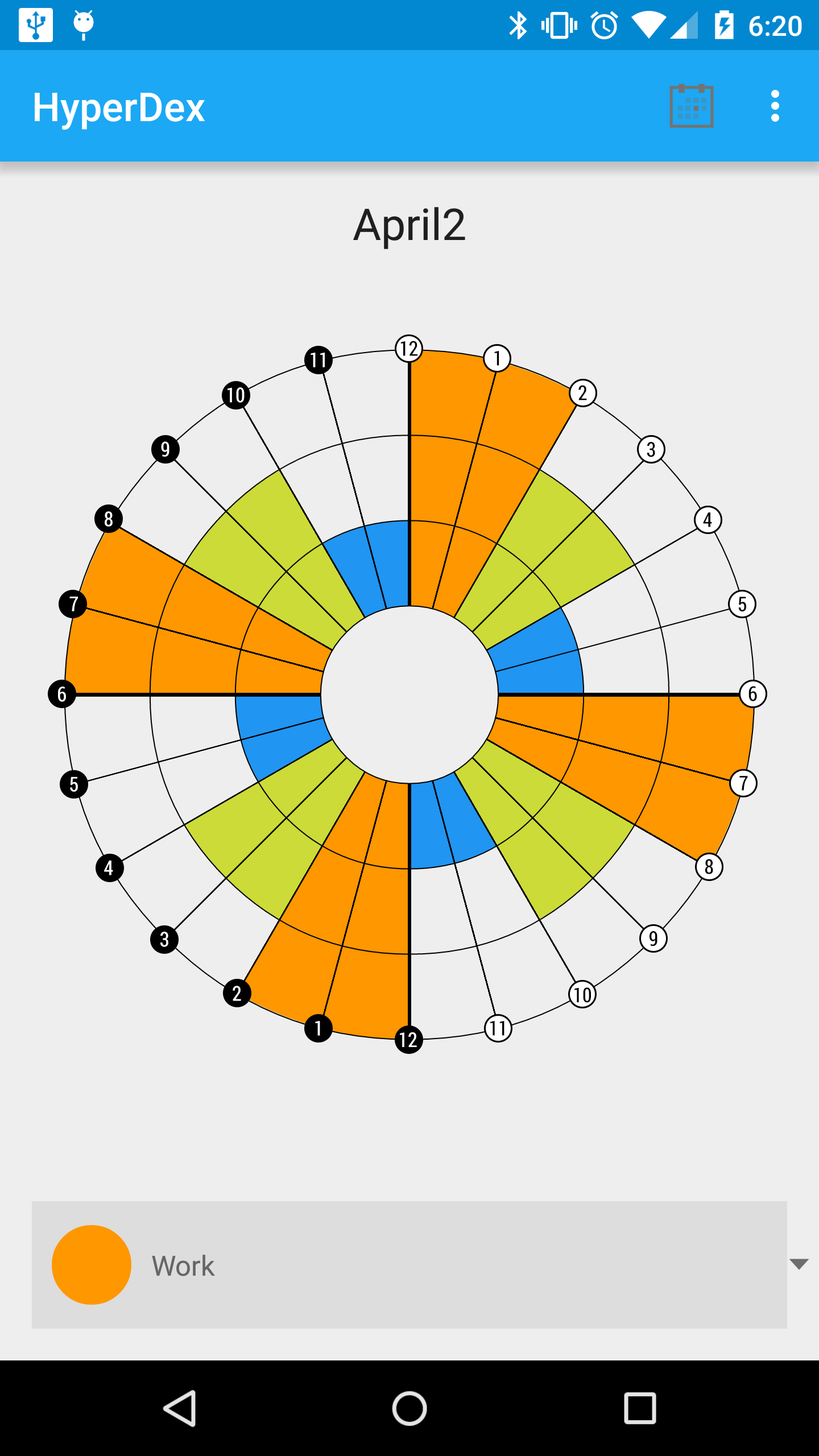
<style>
.page{position:relative;width:819px;height:1456px;background:#eeeeee}
.page>*{position:absolute;margin:0}
.t1{font:20.5px "RobotoCondensed-Regular";color:#000000}
.t2{font:20.5px "RobotoCondensed-Regular";color:#ffffff}
</style>
<div class="page">
<p class="t1" style="left:400px;top:341px;width:17px;height:15px">12</p>
<p class="t2" style="left:311px;top:353px;width:14px;height:14px">11</p>
<p class="t1" style="left:494px;top:351px;width:5px;height:15px">1</p>
<p class="t2" style="left:227px;top:387px;width:18px;height:16px">10</p>
<p class="t1" style="left:578px;top:385px;width:9px;height:15px">2</p>
<p class="t2" style="left:161px;top:441px;width:8px;height:16px">9</p>
<p class="t1" style="left:647px;top:442px;width:8px;height:15px">3</p>
<p class="t2" style="left:105px;top:511px;width:8px;height:16px">8</p>
<p class="t1" style="left:703px;top:512px;width:9px;height:15px">4</p>
<p class="t2" style="left:69px;top:597px;width:9px;height:14px">7</p>
<p class="t1" style="left:738px;top:597px;width:8px;height:14px">5</p>
<p class="t2" style="left:58px;top:686px;width:8px;height:16px">6</p>
<p class="t1" style="left:748px;top:686px;width:9px;height:15px">6</p>
<p class="t2" style="left:70px;top:777px;width:8px;height:15px">5</p>
<p class="t1" style="left:739px;top:776px;width:9px;height:15px">7</p>
<p class="t2" style="left:104px;top:861px;width:9px;height:14px">4</p>
<p class="t1" style="left:705px;top:859px;width:8px;height:15px">8</p>
<p class="t2" style="left:160px;top:932px;width:8px;height:15px">3</p>
<p class="t1" style="left:649px;top:931px;width:8px;height:15px">9</p>
<p class="t2" style="left:233px;top:986px;width:8px;height:15px">2</p>
<p class="t1" style="left:574px;top:987px;width:17px;height:16px">10</p>
<p class="t2" style="left:315px;top:1021px;width:5px;height:15px">1</p>
<p class="t1" style="left:490px;top:1021px;width:14px;height:15px">11</p>
<p class="t2" style="left:400px;top:1032px;width:17px;height:15px">12</p>
</div>
